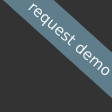
<style>
.page{position:relative;width:112px;height:112px;background:#333333}
.page>*{position:absolute;margin:0}
.t1{font:15px "DejaVuSans";color:#f1f7fa}
</style>
<div class="page">
<p class="t1" style="left:28px;top:3px;width:82px;height:73px;rotate:41deg">request demo</p>
</div>
